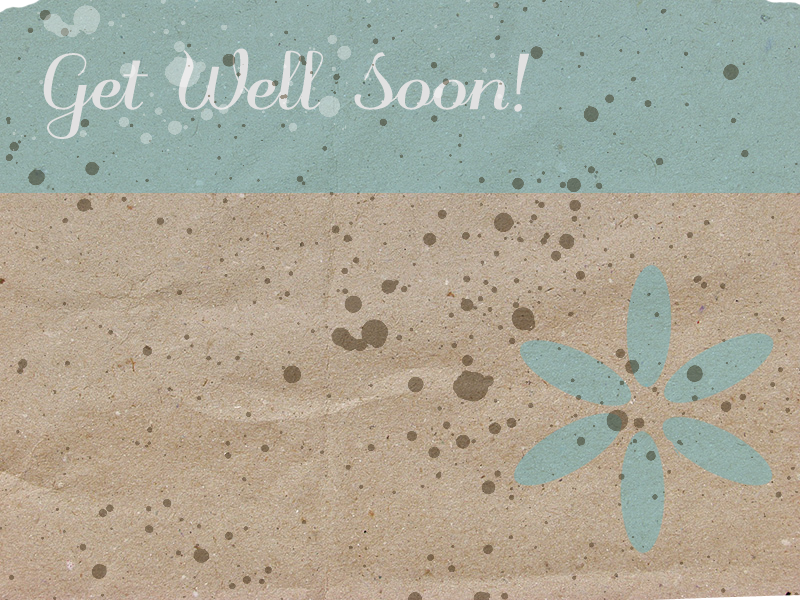
<style>
.page{position:relative;width:800px;height:600px}
.page>*{position:absolute;margin:0}
.t1{font:96px "odstemplikBold";color:#e1e1e1}
</style>
<div class="page">
<p class="t1" style="left:43px;top:48px;width:487px;height:91px">Get Well Soon!</p>
</div>
